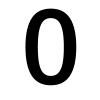
<style>
.page{position:relative;width:100px;height:100px;background:#ffffff}
.page>*{position:absolute;margin:0}
.t1{font:112px "Shruti-Bold";color:#000000}
</style>
<div class="page">
<p class="t1" style="left:25px;top:8px;width:52px;height:78px">0</p>
</div>
